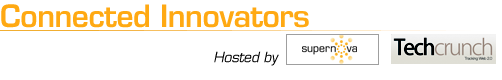
<style>
.page{position:relative;width:502px;height:80px;background:#ffffff}
.page>*{position:absolute;margin:0}
.t1{font:30px "Eurostile-Demi";letter-spacing:-0.02em;color:#ffa913}
.t2{font:14px "Eurostile-Oblique";letter-spacing:-0.02em;color:#000000}
</style>
<div class="page">
<p class="t1" style="left:1px;top:4px;width:308px;height:24px">Connected Innovators</p>
<p class="t2" style="left:214px;top:51px;width:65px;height:15px">Hosted by</p>
</div>
